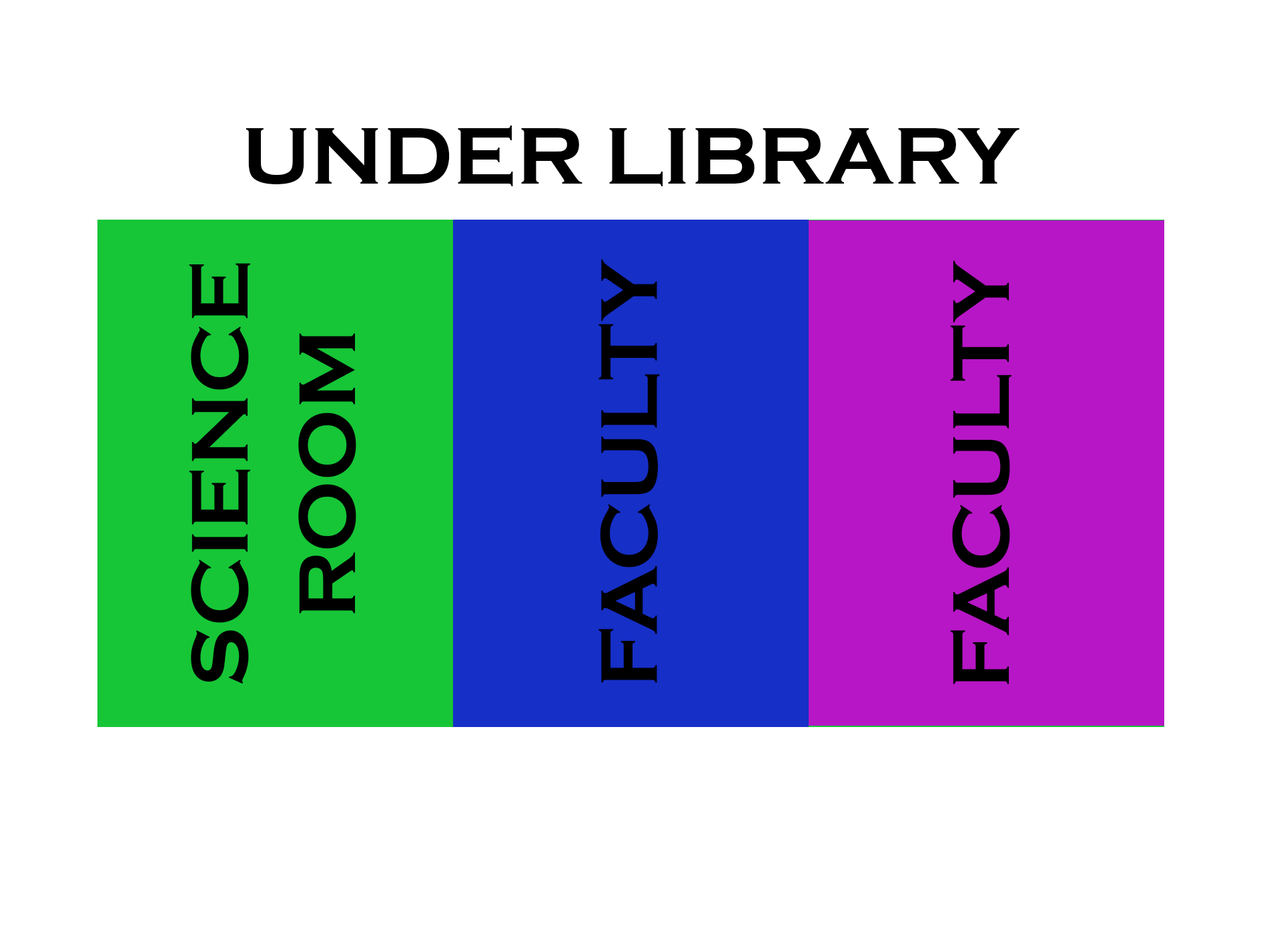
<style>
.page{position:relative;width:1261px;height:946px;background:#ffffff}
.page>*{position:absolute;margin:0}
.t1{font:83.4px "CopperplateGothic-Bold";color:#000000}
.t2{font:83.4px/107.4px "CopperplateGothic-Bold";color:#000000}
</style>
<div class="page">
<p class="t1" style="left:246px;top:125px;width:774px;height:61px">UNDER LIBRARY</p>
<p class="t2" style="left:189px;top:263px;width:167px;height:420px;text-align:center;rotate:-90deg">SCIENCE<br>ROOM</p>
<p class="t1" style="left:599px;top:259px;width:61px;height:424px;rotate:-90deg">FACULTY</p>
<p class="t1" style="left:950px;top:260px;width:62px;height:424px;rotate:-90deg">FACULTY</p>
</div>
